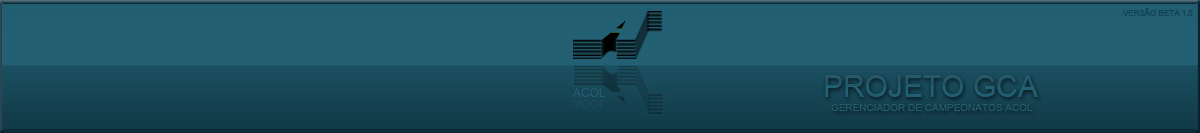
<style>
.page{position:relative;width:1200px;height:133px;background:#236074}
.page>*{position:absolute;margin:0}
.t1{font:8px "ArialMT";color:#134052}
.t2{font:30px "ArialMT";color:#23596b}
.t3{font:12px "ArialMT";color:#235e73}
.t4{font:10.7px "ArialMT";color:#194a59;scale:1.12 1}
.t5{font:10px "ArialMT";color:#23596b}
</style>
<div class="page">
<p class="t1" style="left:1123px;top:8px;width:70px;height:8px">VERSÃO BETA 1.0</p>
<p class="t2" style="left:825px;top:75px;width:214px;height:22px">PROJETO GCA</p>
<p class="t3" style="left:573px;top:88px;width:33px;height:9px">ACOL</p>
<p class="t4" style="left:573px;top:100px;width:33px;height:8px">ACOL</p>
<p class="t5" style="left:831px;top:104px;width:202px;height:7px">GERENCIADOR DE CAMPEONATOS ACOL</p>
</div>
